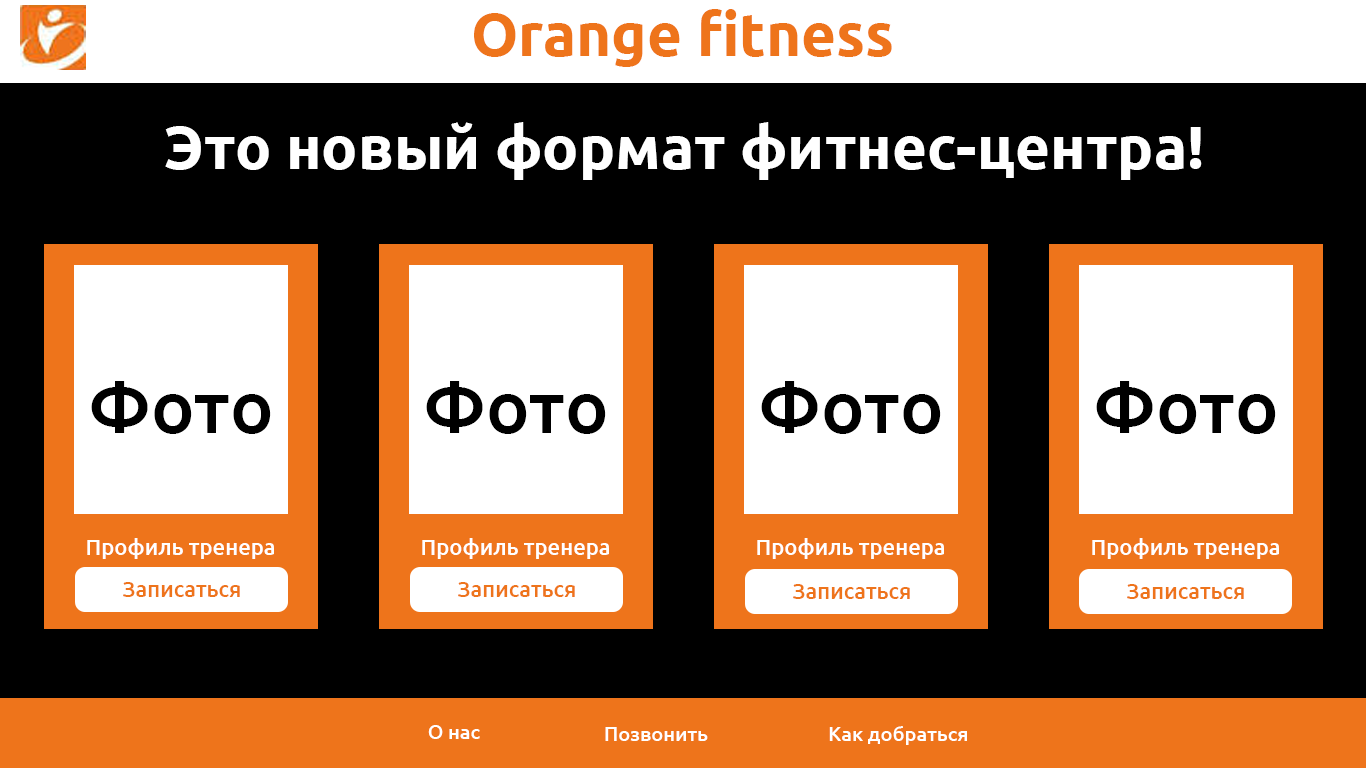
<style>
.page{position:relative;width:1366px;height:768px;background:#000000}
.page>*{position:absolute;margin:0}
.t1{font:60px "Ubuntu-Bold";color:#ee741b}
.t2{font:60px "Ubuntu-Bold";color:#ffffff}
.t3{font:73px "Ubuntu-Medium";color:#000000}
.t4{font:22px "Ubuntu-Medium";color:#ffffff}
.t5{font:22px "Ubuntu-Medium";color:#ee741b}
.t6{font:20px "Ubuntu-Medium";color:#ffffff}
</style>
<div class="page">
<p class="t1" style="left:474px;top:9px;width:418px;height:58px">Orange fitness</p>
<p class="t2" style="left:165px;top:122px;width:1037px;height:58px">Это новый формат фитнес-центра!</p>
<p class="t3" style="left:91px;top:381px;width:180px;height:53px">Фото</p>
<p class="t3" style="left:426px;top:381px;width:180px;height:53px">Фото</p>
<p class="t3" style="left:761px;top:381px;width:180px;height:53px">Фото</p>
<p class="t3" style="left:1096px;top:381px;width:180px;height:53px">Фото</p>
<p class="t4" style="left:87px;top:538px;width:187px;height:21px">Профиль тренера</p>
<p class="t4" style="left:422px;top:538px;width:187px;height:21px">Профиль тренера</p>
<p class="t4" style="left:757px;top:538px;width:187px;height:21px">Профиль тренера</p>
<p class="t4" style="left:1092px;top:538px;width:187px;height:21px">Профиль тренера</p>
<p class="t5" style="left:123px;top:582px;width:117px;height:15px">Записаться</p>
<p class="t5" style="left:458px;top:582px;width:117px;height:15px">Записаться</p>
<p class="t5" style="left:793px;top:584px;width:117px;height:15px">Записаться</p>
<p class="t5" style="left:1127px;top:584px;width:117px;height:15px">Записаться</p>
<p class="t6" style="left:428px;top:725px;width:52px;height:14px">О нас</p>
<p class="t6" style="left:829px;top:726px;width:138px;height:19px">Как добраться</p>
<p class="t6" style="left:605px;top:727px;width:103px;height:14px">Позвонить</p>
</div>
